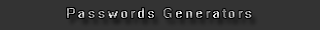
<style>
.page{position:relative;width:320px;height:30px;background:#333333}
.page>*{position:absolute;margin:0}
.t1{font:15px "System";letter-spacing:0.05em}
</style>
<div class="page">
<p class="t1" style="left:67px;top:8px;width:185px;height:10px">Passwords Generators</p>
</div>
